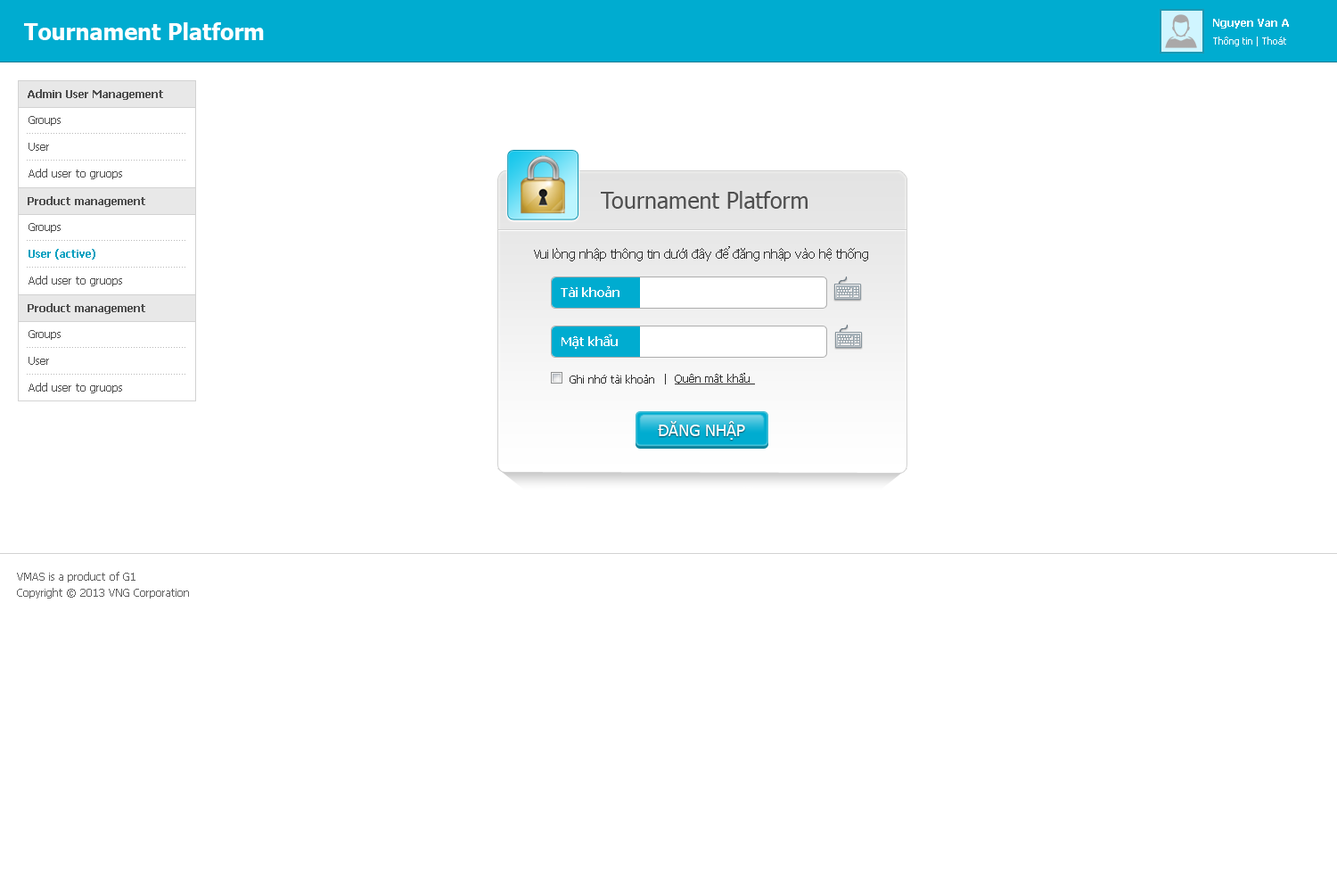
<style>
.page{position:relative;width:1337px;height:892px;background:#ffffff}
.page>*{position:absolute;margin:0}
.t1{font:22.3px "Tahoma-Bold";color:#ffffff}
.t2{font:10.7px "Tahoma-Bold";color:#ffffff}
.t3{font:9.8px "Tahoma";color:#ffffff}
.t4{font:10.7px "Tahoma-Bold";color:#4d4d4d}
.t5{font:10.7px/26.7px "Tahoma";color:#4e4e4e}
.t6{font:22.3px "Tahoma";color:#4f4f4f}
.t7{font:10.7px/26.7px "Tahoma-Bold";color:#05a0c0}
.t8{font:12.5px "Tahoma";color:#2f2f2f}
.t9{font:12.5px "Tahoma-Bold";color:#fffefe}
.t10{font:10.7px "Tahoma";color:#2f2f2f}
.t11{font:10.7px "Tahoma";color:#2f2f2f;text-decoration:underline}
.t12{font:16px "Tahoma";color:#ffffff;text-transform:uppercase}
.t13{font:10.7px/16px "Tahoma";color:#606060}
</style>
<div class="page">
<p class="t1" style="left:24px;top:22px;width:240px;height:18px">Tournament Platform</p>
<p class="t2" style="left:1213px;top:19px;width:76px;height:10px">Nguyen Van A</p>
<p class="t3" style="left:1213px;top:37px;width:74px;height:9px">Thông tin | Thoát</p>
<p class="t4" style="left:28px;top:89px;width:135px;height:11px">Admin User Management</p>
<p class="t5" style="left:29px;top:116px;width:93px;height:63px">Groups<br>User<br>Add user to gruops</p>
<p class="t4" style="left:28px;top:196px;width:117px;height:11px">Product management</p>
<p class="t6" style="left:601px;top:191px;width:207px;height:18px">Tournament Platform</p>
<p class="t5" style="left:29px;top:223px;width:93px;height:63px">Groups<br><span class="t7">User (active)<br></span>Add user to gruops</p>
<p class="t8" style="left:534px;top:246px;width:334px;height:15px">Vui lòng nhập thông tin dưới đây để đăng nhập vào hệ thống</p>
<p class="t9" style="left:561px;top:286px;width:59px;height:11px">Tài khoản</p>
<p class="t4" style="left:28px;top:303px;width:117px;height:11px">Product management</p>
<p class="t5" style="left:29px;top:330px;width:93px;height:63px">Groups<br>User<br>Add user to gruops</p>
<p class="t9" style="left:562px;top:334px;width:56px;height:15px">Mật khẩu</p>
<p class="t10" style="left:570px;top:374px;width:84px;height:9px">Ghi nhớ tài khoản</p>
<p class="t11" style="left:665px;top:373px;width:90px;height:11px"><span class="t10">|  </span>Quên mật khẩu</p>
<p class="t12" style="left:658px;top:421px;width:87px;height:19px">Đăng Nhập</p>
<p class="t13" style="left:17px;top:572px;width:172px;height:26px">VMAS is a product of G1<br>Copyright © 2013 VNG Corporation</p>
</div>
